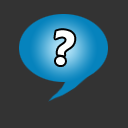
<style>
.page{position:relative;width:128px;height:128px;background:#333333}
.page>*{position:absolute;margin:0}
.t1{font:48px "LaoUI-Bold";letter-spacing:0.1em;color:#fdfffe}
</style>
<div class="page">
<p class="t1" style="left:55px;top:30px;width:20px;height:35px;rotate:8deg">?</p>
</div>
